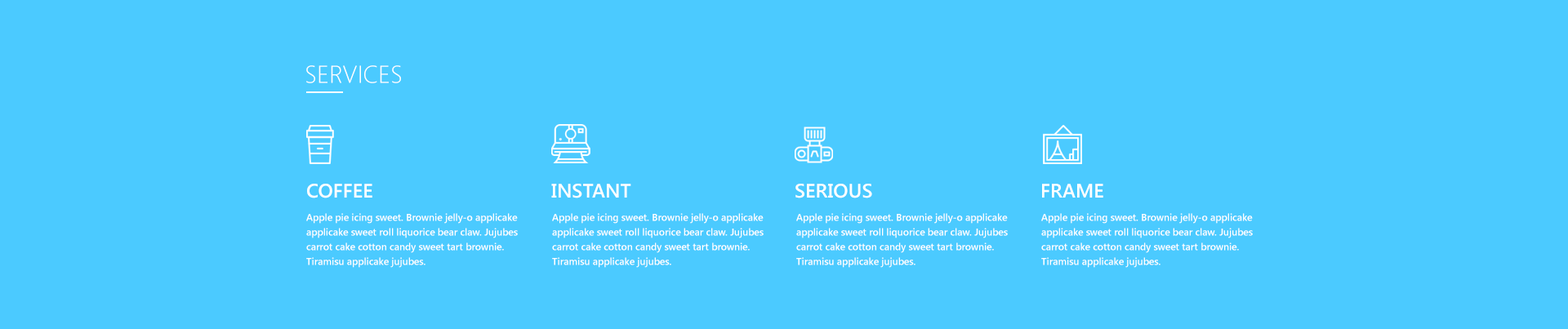
<style>
.page{position:relative;width:1568px;height:329px;background:#4bcaff}
.page>*{position:absolute;margin:0}
.t1{font:24.5px "SegoeUI-Light";color:#ffffff;text-transform:uppercase}
.t2{font:19.6px "SegoeUI-SemiBold";color:#ffffff;text-transform:uppercase}
.t3{font:9.8px/14.7px "SegoeUI-SemiBold";color:#ffffff}
</style>
<div class="page">
<p class="t1" style="left:306px;top:65px;width:95px;height:18px">Services</p>
<p class="t2" style="left:307px;top:184px;width:65px;height:14px">Coffee</p>
<p class="t2" style="left:551px;top:184px;width:80px;height:14px">Instant</p>
<p class="t2" style="left:795px;top:184px;width:77px;height:14px">Serious</p>
<p class="t2" style="left:1042px;top:184px;width:61px;height:14px">Frame</p>
<p class="t3" style="left:306px;top:213px;width:212px;height:55px">Apple pie icing sweet. Brownie jelly-o applicake applicake sweet roll liquorice bear claw. Jujubes carrot cake cotton candy sweet tart brownie. Tiramisu applicake jujubes.</p>
<p class="t3" style="left:552px;top:213px;width:212px;height:55px">Apple pie icing sweet. Brownie jelly-o applicake applicake sweet roll liquorice bear claw. Jujubes carrot cake cotton candy sweet tart brownie. Tiramisu applicake jujubes.</p>
<p class="t3" style="left:796px;top:213px;width:212px;height:55px">Apple pie icing sweet. Brownie jelly-o applicake applicake sweet roll liquorice bear claw. Jujubes carrot cake cotton candy sweet tart brownie. Tiramisu applicake jujubes.</p>
<p class="t3" style="left:1041px;top:213px;width:212px;height:55px">Apple pie icing sweet. Brownie jelly-o applicake applicake sweet roll liquorice bear claw. Jujubes carrot cake cotton candy sweet tart brownie. Tiramisu applicake jujubes.</p>
</div>
